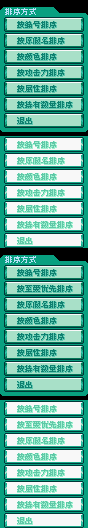
<style>
.page{position:relative;width:88px;height:528px}
.page>*{position:absolute;margin:0}
.t1{font:8px "GuanZhi";color:#b8e0f8}
.t2{font:8px/16px "GuanZhi";color:#108070}
.t3{font:7.7px "GuanZhi";color:#b8e0f8;scale:1.04 1}
</style>
<div class="page">
<p class="t1" style="left:5px;top:8px;width:31px;height:7px">排序方式</p>
<p class="t2" style="left:17px;top:21px;width:55px;height:103px">按编号排序<br>按原假名排序<br>按颜色排序<br>按攻击力排序<br>按属性排序<br>按持有数量排序<br>退出</p>
<p class="t3" style="left:5px;top:256px;width:31px;height:7px">排序方式</p>
<p class="t2" style="left:17px;top:269px;width:55px;height:119px">按编号排序<br>按至爱优先排序<br>按原假名排序<br>按颜色排序<br>按攻击力排序<br>按属性排序<br>按持有数量排序<br>退出</p>
</div>
